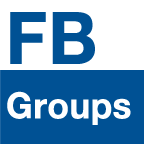
<style>
.page{position:relative;width:144px;height:144px;background:#005194}
.page>*{position:absolute;margin:0}
.t1{font:72px "HelveticaNeue-Bold";letter-spacing:-0.01em;color:#005194;font-weight:bold;scale:0.97 1}
.t2{font:36px "HelveticaNeue-Bold";letter-spacing:-0.01em;color:#ffffff;font-weight:bold;scale:0.97 1}
</style>
<div class="page">
<p class="t1" style="left:10px;top:12px;width:85px;height:52px">FB</p>
<p class="t2" style="left:7px;top:91px;width:124px;height:34px">Groups</p>
</div>
